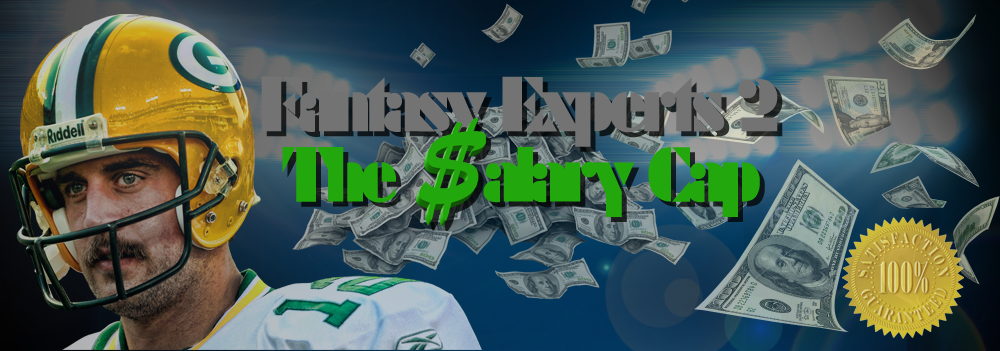
<style>
.page{position:relative;width:1000px;height:351px}
.page>*{position:absolute;margin:0}
.t1{font:83.3px "Futura_Poster-Light";letter-spacing:-0.075em;color:#737373}
.t2{font:83.3px "Futura_Poster-Light";letter-spacing:-0.075em;color:#22a70c}
</style>
<div class="page">
<p class="t1" style="left:261px;top:76px;width:517px;height:71px">Fantasy Experts 2</p>
<p class="t2" style="left:282px;top:147px;width:478px;height:70px">The     alary Cap</p>
</div>
